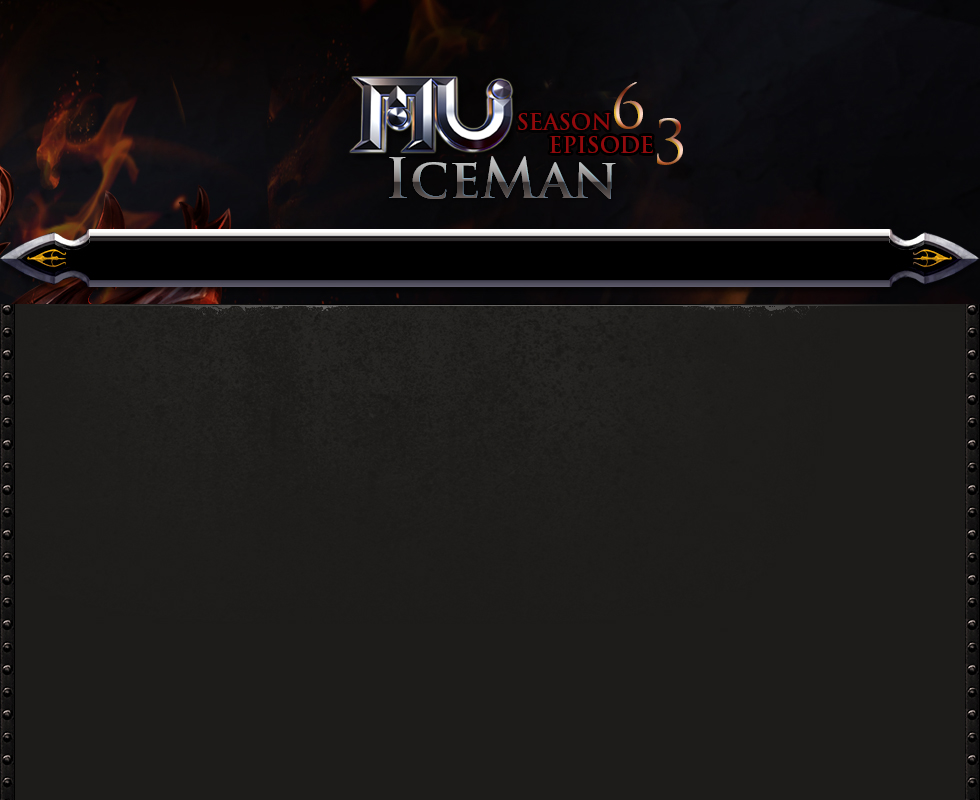
<style>
.page{position:relative;width:980px;height:800px;background:#1d1c1a}
.page>*{position:absolute;margin:0}
.t1{font:60px "TrajanPro-Regular"}
.t2{font:22px "TrajanPro-Bold";color:#91090b}
.t3{font:22px "TrajanPro-Bold";color:#91090c}
.t4{font:55px "TrajanPro-Bold"}
</style>
<div class="page">
<p class="t1" style="left:614px;top:82px;width:29px;height:47px">6</p>
<p class="t2" style="left:518px;top:113px;width:93px;height:17px">SEASON</p>
<p class="t1" style="left:657px;top:118px;width:26px;height:47px">3</p>
<p class="t3" style="left:549px;top:136px;width:104px;height:17px">EPISODE</p>
<p class="t4" style="left:389px;top:156px;width:227px;height:43px">IceMan</p>
</div>
